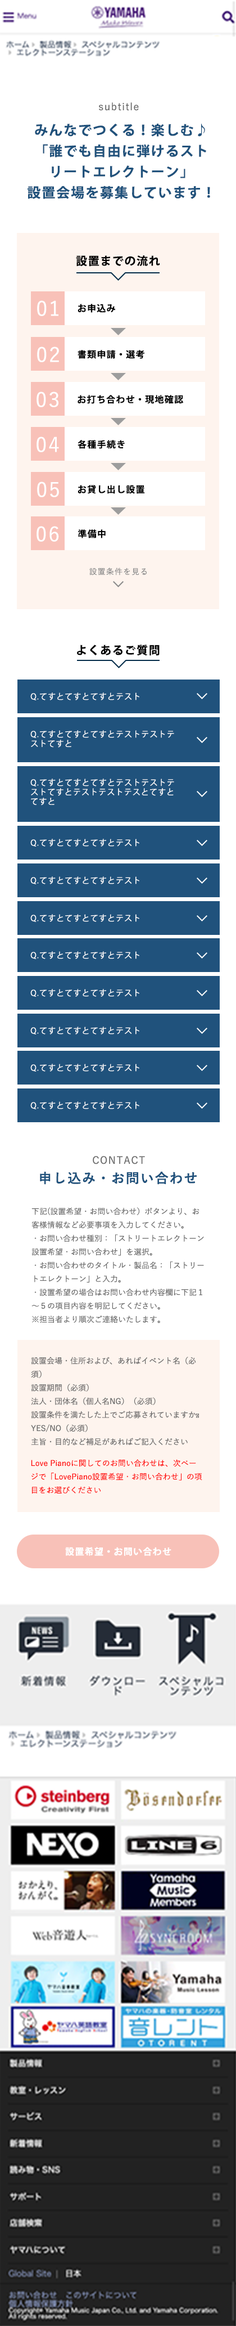
<style>
.page{position:relative;width:236px;height:2326px;background:#ffffff}
.page>*{position:absolute;margin:0}
.t1{font:10.1px "YuGo-Medium";letter-spacing:0.08em;color:#666666}
.t2{font:13.5px/20.8px "KozGoPr6N-Bold";letter-spacing:0.08em;color:#20527c}
.t3{font:11.2px "KozGoPr6N-Bold";letter-spacing:0.08em;color:#000000}
.t4{font:20.2px "YuGo-Medium";letter-spacing:0.08em;color:#ffffff}
.t5{font:9px "KozGoPr6N-Bold";letter-spacing:0.08em;color:#000000}
.t6{font:7.9px "YuGo-Medium";letter-spacing:0.08em;color:#8a8a8a}
.t7{font:7.9px "KozGoPr6N-Regular";letter-spacing:0.08em;color:#ffffff}
.t8{font:13.5px "YuGo-Bold";letter-spacing:0.08em;color:#20527c}
.t9{font:7.9px/13.5px "YuGo-Medium";color:#666666}
.t10{font:7.9px/13.5px "MyriadArabic-Regular";color:#666666}
.t11{font:7.9px/13.5px "YuGo-Medium";color:#ff0000}
.t12{font:9px "KozGoPr6N-Bold";letter-spacing:0.08em;color:#ffffff}
</style>
<div class="page">
<p class="t1" style="left:99px;top:102px;width:40px;height:9px">subtitle</p>
<p class="t2" style="left:28px;top:123px;width:182px;height:76px;text-align:center">みんなでつくる！楽しむ♪<br>「誰でも自由に弾けるスト<br>リートエレクトーン」<br>設置会場を募集しています！</p>
<p class="t3" style="left:76px;top:255px;width:84px;height:12px">設置までの流れ</p>
<p class="t4" style="left:37px;top:300px;width:21px;height:16px">01</p>
<p class="t5" style="left:78px;top:304px;width:38px;height:9px">お申込み</p>
<p class="t4" style="left:37px;top:346px;width:22px;height:16px">02</p>
<p class="t5" style="left:78px;top:350px;width:67px;height:9px">書類申請・選考</p>
<p class="t4" style="left:37px;top:392px;width:21px;height:15px">03</p>
<p class="t5" style="left:78px;top:395px;width:105px;height:9px">お打ち合わせ・現地確認</p>
<p class="t4" style="left:37px;top:436px;width:22px;height:16px">04</p>
<p class="t5" style="left:78px;top:440px;width:47px;height:9px">各種手続き</p>
<p class="t4" style="left:37px;top:482px;width:22px;height:15px">05</p>
<p class="t5" style="left:78px;top:485px;width:67px;height:9px">お貸し出し設置</p>
<p class="t4" style="left:37px;top:526px;width:22px;height:16px">06</p>
<p class="t5" style="left:78px;top:529px;width:28px;height:9px">準備中</p>
<p class="t6" style="left:89px;top:568px;width:58px;height:7px">設置条件を見る</p>
<p class="t3" style="left:77px;top:645px;width:83px;height:11px">よくあるご質問</p>
<p class="t7" style="left:30px;top:692px;width:110px;height:8px">Q.てすとてすとてすとテスト</p>
<p class="t7" style="left:30px;top:730px;width:144px;height:18px">Q.てすとてすとてすとテストテストテ<br>ストてすと</p>
<p class="t7" style="left:30px;top:778px;width:144px;height:28px">Q.てすとてすとてすとテストテストテ<br>ストてすとテストテストテスとてすと<br>てすと</p>
<p class="t7" style="left:30px;top:839px;width:110px;height:8px">Q.てすとてすとてすとテスト</p>
<p class="t7" style="left:30px;top:876px;width:110px;height:8px">Q.てすとてすとてすとテスト</p>
<p class="t7" style="left:30px;top:914px;width:110px;height:8px">Q.てすとてすとてすとテスト</p>
<p class="t7" style="left:30px;top:951px;width:110px;height:8px">Q.てすとてすとてすとテスト</p>
<p class="t7" style="left:30px;top:989px;width:110px;height:8px">Q.てすとてすとてすとテスト</p>
<p class="t7" style="left:30px;top:1027px;width:110px;height:7px">Q.てすとてすとてすとテスト</p>
<p class="t7" style="left:30px;top:1064px;width:110px;height:8px">Q.てすとてすとてすとテスト</p>
<p class="t7" style="left:30px;top:1101px;width:110px;height:8px">Q.てすとてすとてすとテスト</p>
<p class="t1" style="left:93px;top:1156px;width:52px;height:8px">CONTACT</p>
<p class="t8" style="left:40px;top:1171px;width:157px;height:14px">申し込み・お問い合わせ</p>
<p class="t9" style="left:32px;top:1207px;width:172px;height:116px">下記(設置希望・お問い合わせ）ボタンより、お<br>客様情報など必要事項を入力してください。<br>・お問い合わせ種別：「ストリートエレクトーン<br>設置希望・お問い合わせ」を選択。<br>・お問い合わせのタイトル・製品名：「ストリー<br>トエレクトーン」と入力。<br>・設置希望の場合はお問い合わせ内容欄に下記１<br>～５の項目内容を明記してください。<br>※担当者より順次ご連絡いたします。</p>
<p class="t9" style="left:31px;top:1357px;width:168px;height:89px">設置会場・住所および、あればイベント名（必<br>須）<br>設置期間（必須）<br>法人・団体名（個人名NG）（必須）<br>設置条件を満たした上でご応募されていますか<span class="t10">︖</span><br>YES/NO（必須）<br>主旨・目的など補足があればご記入ください</p>
<p class="t11" style="left:31px;top:1459px;width:171px;height:35px">Love Pianoに関してのお問い合わせは、次ペー<br>ジで「LovePiano設置希望・お問い合わせ」の項<br>目をお選びください</p>
<p class="t12" style="left:65px;top:1547px;width:107px;height:9px">設置希望・お問い合わせ</p>
</div>
